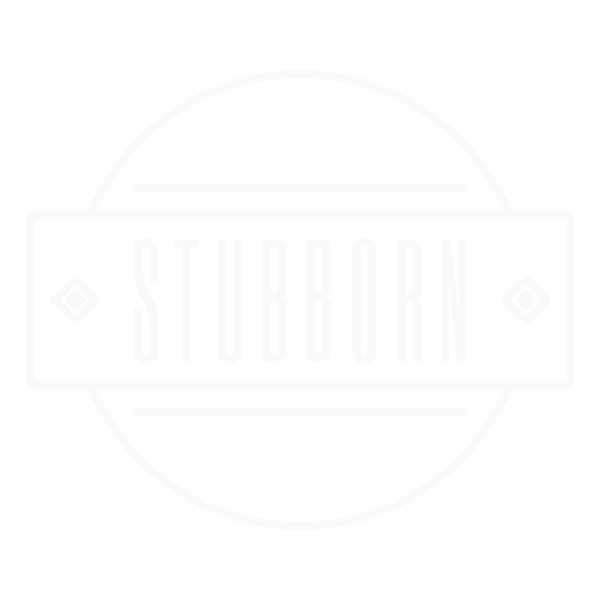
<style>
.page{position:relative;width:600px;height:600px;background:#ffffff}
.page>*{position:absolute;margin:0}
.t1{font:143.7px "SixCaps";letter-spacing:0.08em;color:#fafafa;font-weight:bold;scale:0.88 1}
</style>
<div class="page">
<p class="t1" style="left:133px;top:238px;width:334px;height:126px">STUBBORN</p>
</div>
